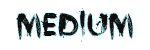
<style>
.page{position:relative;width:150px;height:50px;background:#ffffff}
.page>*{position:absolute;margin:0}
.t1{font:36px "FaceYourFears";color:#0e0e0e}
</style>
<div class="page">
<p class="t1" style="left:16px;top:8px;width:118px;height:34px">Medium</p>
</div>
